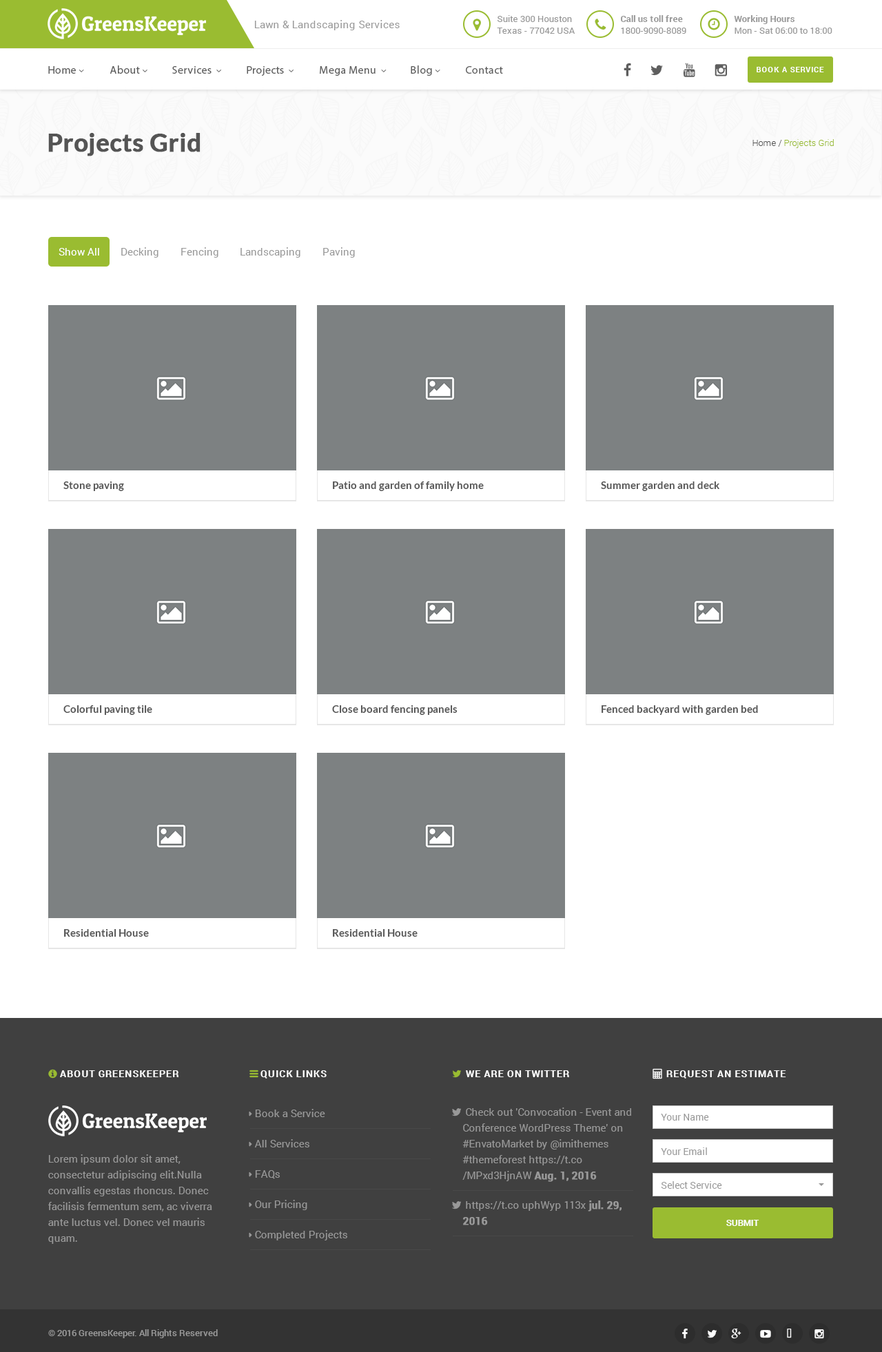
<style>
.page{position:relative;width:882px;height:1352px;background:#ffffff}
.page>*{position:absolute;margin:0}
.t1{font:9px/11.7px "Roboto-Regular";letter-spacing:0.02em;color:#999999}
.t2{font:9px/11.7px "Roboto-Bold";letter-spacing:0.02em;color:#999999}
.t3{font:10.3px "Roboto-Regular";letter-spacing:0.02em;color:#999999}
.t4{font:11px "MyriadPro-Regular";letter-spacing:0.02em;color:#5e5e5e}
.t5{font:7.6px "Roboto-Bold";letter-spacing:0.08em;color:#ffffff;text-transform:uppercase}
.t6{font:24.8px "Lato-Bold";color:#555555;font-weight:bold}
.t7{font:9px "Roboto-Light";color:#9abc31}
.t8{font:9px "Roboto-Light";color:#555555}
.t9{font:10.3px "Roboto-Regular";color:#ffffff}
.t10{font:10.3px "Roboto-Regular";color:#999999}
.t11{font:10.3px "Lato-Bold";color:#555555}
.t12{font:9.6px "Roboto-Bold";letter-spacing:0.08em;color:#ffffff;text-transform:uppercase}
.t13{font:10.3px/15.8px "Roboto-Regular";color:#999999}
.t14{font:10.3px/15.8px "Roboto-Bold";color:#999999;font-weight:bold}
.t15{font:9.6px "Roboto-Regular";color:#999999}
.t16{font:9px "Roboto-Bold";color:#ffffff;text-transform:uppercase}
.t17{font:9px "Roboto-Medium";color:#999999}
</style>
<div class="page">
<p class="t1" style="left:497px;top:15px;width:78px;height:19px">Suite 300 Houston<br>Texas - 77042 USA</p>
<p class="t2" style="left:621px;top:15px;width:65px;height:19px">Call us toll free<br><span class="t1">1800-9090-8089</span></p>
<p class="t1" style="left:734px;top:15px;width:98px;height:19px"><span class="t2">Working Hours<br></span>Mon - Sat 06:00 to 18:00</p>
<p class="t3" style="left:254px;top:20px;width:146px;height:10px">Lawn &amp; Landscaping Services</p>
<p class="t4" style="left:466px;top:66px;width:37px;height:8px">Contact</p>
<p class="t5" style="left:756px;top:67px;width:68px;height:5px">Book a service</p>
<p class="t6" style="left:48px;top:133px;width:152px;height:23px">Projects Grid</p>
<p class="t7" style="left:752px;top:139px;width:82px;height:9px"><span class="t8">Home / </span>Projects Grid</p>
<p class="t9" style="left:59px;top:248px;width:40px;height:8px">Show All</p>
<p class="t10" style="left:121px;top:247px;width:37px;height:11px">Decking</p>
<p class="t10" style="left:181px;top:247px;width:37px;height:11px">Fencing</p>
<p class="t10" style="left:240px;top:247px;width:60px;height:11px">Landscaping</p>
<p class="t10" style="left:323px;top:247px;width:32px;height:11px">Paving</p>
<p class="t11" style="left:63px;top:482px;width:61px;height:9px">Stone paving</p>
<p class="t11" style="left:333px;top:482px;width:151px;height:9px">Patio and garden of family home</p>
<p class="t11" style="left:601px;top:482px;width:118px;height:9px">Summer garden and deck</p>
<p class="t11" style="left:63px;top:705px;width:89px;height:10px">Colorful paving tile</p>
<p class="t11" style="left:332px;top:705px;width:125px;height:10px">Close board fencing panels</p>
<p class="t11" style="left:601px;top:705px;width:157px;height:10px">Fenced backyard with garden bed</p>
<p class="t11" style="left:64px;top:929px;width:85px;height:8px">Residential House</p>
<p class="t11" style="left:333px;top:929px;width:84px;height:8px">Residential House</p>
<p class="t12" style="left:60px;top:1071px;width:119px;height:6px">About GreensKeeper</p>
<p class="t12" style="left:260px;top:1071px;width:67px;height:8px">Quick Links</p>
<p class="t12" style="left:466px;top:1071px;width:103px;height:6px">We are on Twitter</p>
<p class="t12" style="left:666px;top:1071px;width:120px;height:8px">Request an Estimate</p>
<p class="t10" style="left:255px;top:1109px;width:70px;height:8px">Book a Service</p>
<p class="t13" style="left:462px;top:1108px;width:169px;height:74px">Check out 'Convocation - Event and <br>Conference WordPress Theme' on<br>#EnvatoMarket by @imithemes<br>#themeforest https://t.co<br>/MPxd3HjnAW <span class="t14">Aug. 1, 2016</span></p>
<p class="t15" style="left:661px;top:1114px;width:48px;height:7px">Your Name</p>
<p class="t10" style="left:254px;top:1139px;width:55px;height:9px">All Services</p>
<p class="t13" style="left:48px;top:1155px;width:164px;height:89px">Lorem ipsum dolor sit amet, <br>consectetur adipiscing elit.Nulla <br>convallis egestas rhoncus. Donec <br>facilisis fermentum sem, ac viverra <br>ante luctus vel. Donec vel mauris <br>quam.</p>
<p class="t15" style="left:661px;top:1148px;width:46px;height:7px">Your Email</p>
<p class="t10" style="left:255px;top:1170px;width:25px;height:9px">FAQs</p>
<p class="t15" style="left:661px;top:1181px;width:61px;height:8px">Select Service</p>
<p class="t10" style="left:255px;top:1200px;width:52px;height:10px">Our Pricing</p>
<p class="t13" style="left:463px;top:1201px;width:158px;height:25px">https://t.co uphWyp 113x<span class="t14"> jul. 29,<br>2016</span></p>
<p class="t16" style="left:726px;top:1220px;width:33px;height:6px">Submit</p>
<p class="t10" style="left:255px;top:1230px;width:92px;height:11px">Completed Projects</p>
<p class="t17" style="left:48px;top:1330px;width:170px;height:9px">© 2016 GreensKeeper. All Rights Reserved</p>
</div>
